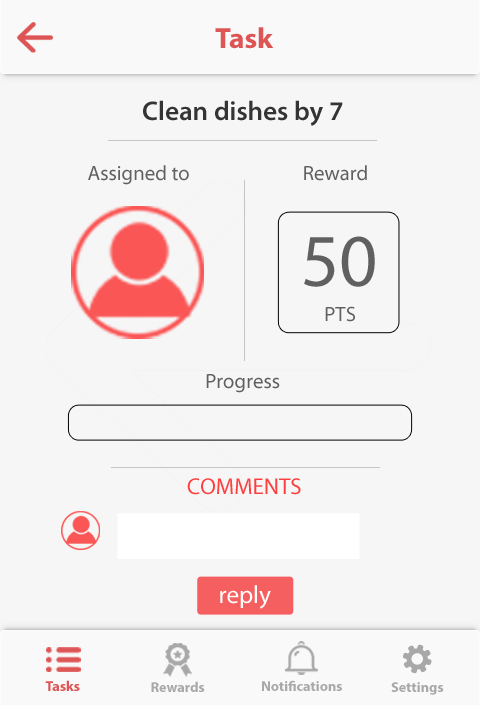
<style>
.page{position:relative;width:480px;height:705px;background:#f6f6f6}
.page>*{position:absolute;margin:0}
.t1{font:29.2px "MyriadPro-Bold";color:#dd5555}
.t2{font:27.1px "MyriadPro-Semibold";color:#343434}
.t3{font:20.8px "MyriadPro-Regular";color:#606060}
.t4{font:75px "MyriadPro-Regular";color:#606060}
.t5{font:22.9px "MyriadPro-Regular";color:#fc4040}
.t6{font:25px "MyriadPro-Regular";color:#ffffff}
.t7{font:14.2px "MyriadPro-Bold";color:#dd5555}
.t8{font:14.2px "MyriadPro-Bold";color:#a8a8a8}
</style>
<div class="page">
<p class="t1" style="left:215px;top:27px;width:59px;height:22px">Task</p>
<p class="t2" style="left:143px;top:100px;width:200px;height:26px">Clean dishes by 7</p>
<p class="t3" style="left:88px;top:165px;width:101px;height:20px">Assigned to</p>
<p class="t3" style="left:304px;top:165px;width:63px;height:16px">Reward</p>
<p class="t4" style="left:304px;top:236px;width:71px;height:51px">50</p>
<p class="t3" style="left:325px;top:306px;width:30px;height:16px">PTS</p>
<p class="t3" style="left:206px;top:374px;width:74px;height:19px">Progress</p>
<p class="t5" style="left:187px;top:478px;width:114px;height:17px">COMMENTS</p>
<p class="t6" style="left:220px;top:585px;width:51px;height:24px">reply</p>
<p class="t7" style="left:45px;top:680px;width:35px;height:11px">Tasks</p>
<p class="t8" style="left:151px;top:681px;width:54px;height:11px">Rewards</p>
<p class="t8" style="left:262px;top:680px;width:80px;height:11px">Notifications</p>
<p class="t8" style="left:391px;top:682px;width:53px;height:13px">Settings</p>
</div>
